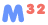
<style>
.page{position:relative;width:48px;height:25px;background:#ffffff}
.page>*{position:absolute;margin:0}
.t1{font:24px "Debussy";letter-spacing:0.06em;color:#f37066}
.t2{font:24px "Debussy";letter-spacing:0.06em;color:#6995fc}
</style>
<div class="page">
<p class="t1" style="left:2px;top:3px;width:43px;height:20px"><span class="t2">M</span>32</p>
</div>
